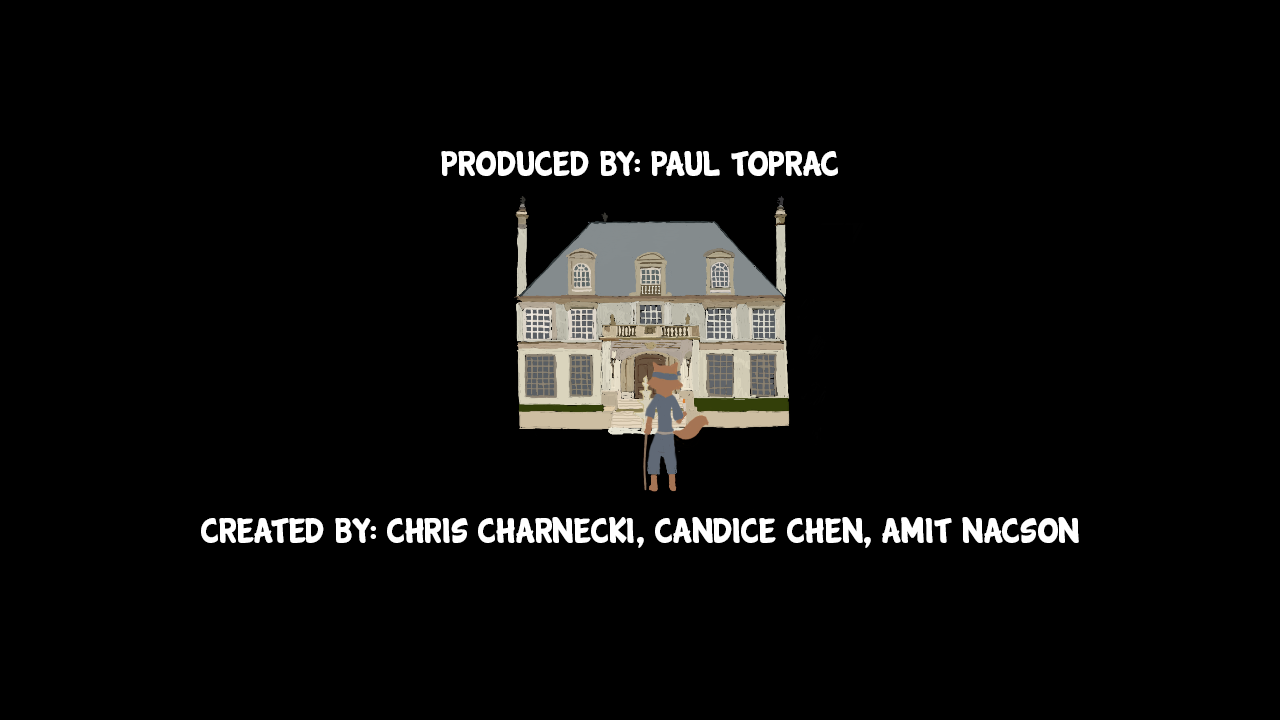
<style>
.page{position:relative;width:1280px;height:720px;background:#000000}
.page>*{position:absolute;margin:0}
.t1{font:36px "Cartwheel";color:#ffffff}
</style>
<div class="page">
<p class="t1" style="left:441px;top:151px;width:397px;height:25px">Produced by: Paul Toprac</p>
<p class="t1" style="left:201px;top:517px;width:878px;height:31px">Created by: Chris Charnecki, Candice Chen, Amit Nacson</p>
</div>
